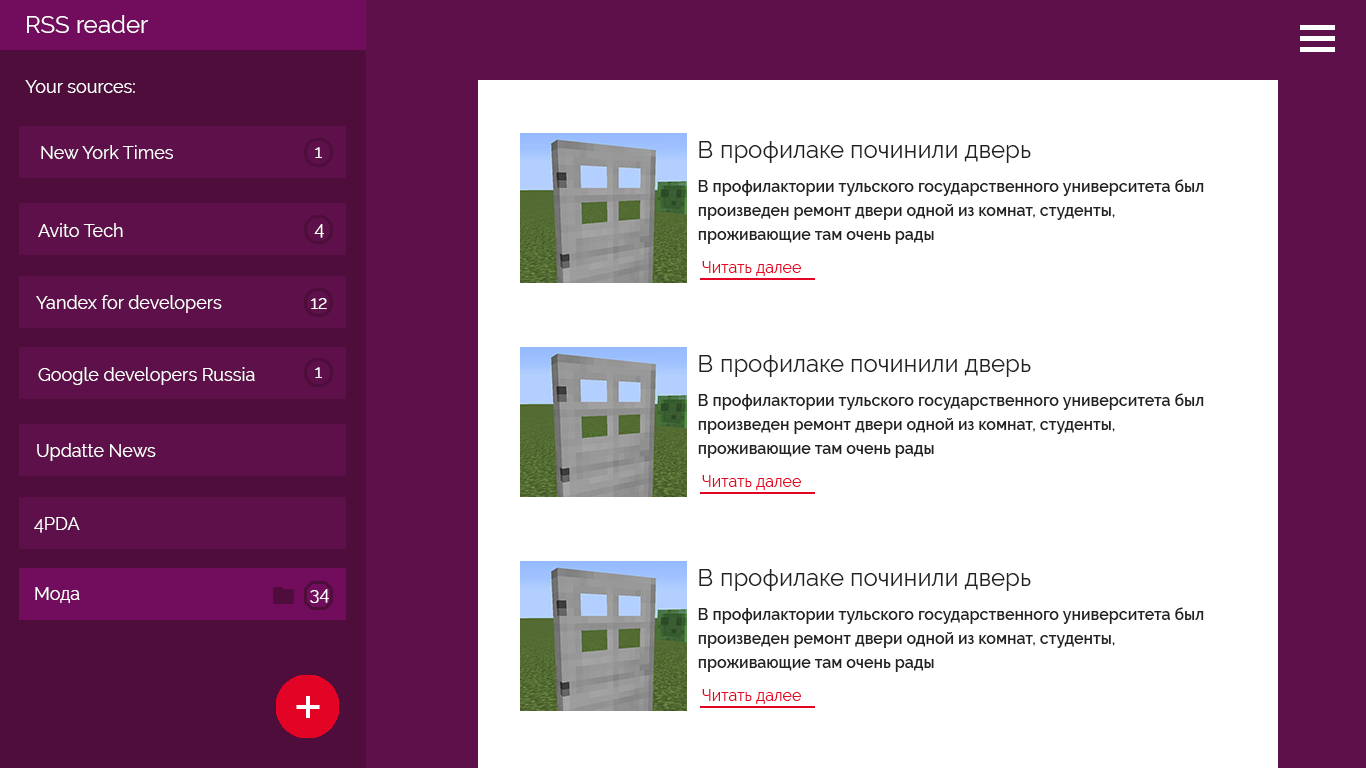
<style>
.page{position:relative;width:1366px;height:768px;background:#ffffff}
.page>*{position:absolute;margin:0}
.t1{font:24px "Raleway-Regular";color:#ffffff}
.t2{font:18px "Raleway-Regular";color:#ffffff}
.t3{font:24px "Raleway-Regular";color:#212121}
.t4{font:16px/24px "Raleway-SemiBold";color:#212121}
.t5{font:16px "Raleway-Regular";color:#e30425}
.t6{font:48px "ArialMT";color:#ffffff}
</style>
<div class="page">
<p class="t1" style="left:27px;top:15px;width:122px;height:18px">RSS reader</p>
<p class="t2" style="left:25px;top:80px;width:110px;height:13px">Your sources:</p>
<p class="t2" style="left:41px;top:145px;width:132px;height:14px">New York Times</p>
<p class="t2" style="left:315px;top:147px;width:7px;height:11px">1</p>
<p class="t3" style="left:699px;top:141px;width:332px;height:22px">В профилаке починили дверь</p>
<p class="t4" style="left:698px;top:179px;width:506px;height:65px">В профилактории тульского государственного университета был произведен ремонт двери одной из комнат, студенты, проживающие там очень рады</p>
<p class="t2" style="left:38px;top:223px;width:85px;height:14px">Avito Tech</p>
<p class="t2" style="left:314px;top:224px;width:10px;height:14px">4</p>
<p class="t5" style="left:702px;top:261px;width:99px;height:15px">Читать далее</p>
<p class="t2" style="left:36px;top:295px;width:186px;height:18px">Yandex for developers</p>
<p class="t2" style="left:311px;top:298px;width:16px;height:11px">12</p>
<p class="t3" style="left:699px;top:355px;width:332px;height:22px">В профилаке починили дверь</p>
<p class="t2" style="left:38px;top:367px;width:217px;height:18px">Google developers Russia</p>
<p class="t2" style="left:315px;top:367px;width:7px;height:11px">1</p>
<p class="t4" style="left:698px;top:393px;width:506px;height:65px">В профилактории тульского государственного университета был произведен ремонт двери одной из комнат, студенты, проживающие там очень рады</p>
<p class="t2" style="left:37px;top:443px;width:119px;height:18px">Updatte News</p>
<p class="t5" style="left:702px;top:475px;width:99px;height:15px">Читать далее</p>
<p class="t2" style="left:34px;top:517px;width:46px;height:16px">4PDA</p>
<p class="t3" style="left:699px;top:569px;width:332px;height:22px">В профилаке починили дверь</p>
<p class="t2" style="left:35px;top:587px;width:45px;height:16px">Мода</p>
<p class="t2" style="left:310px;top:589px;width:19px;height:14px">34</p>
<p class="t4" style="left:698px;top:607px;width:506px;height:65px">В профилактории тульского государственного университета был произведен ремонт двери одной из комнат, студенты, проживающие там очень рады</p>
<p class="t5" style="left:702px;top:689px;width:99px;height:15px">Читать далее</p>
<p class="t6" style="left:296px;top:696px;width:24px;height:22px">+</p>
</div>
